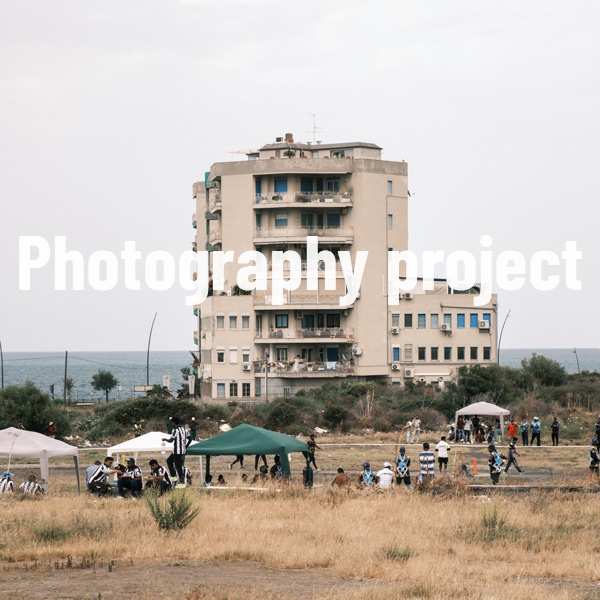
<style>
.page{position:relative;width:600px;height:600px}
.page>*{position:absolute;margin:0}
.t1{font:76.8px "BarlowCondensed-Bold";color:#fdfdfd}
</style>
<div class="page">
<p class="t1" style="left:19px;top:235px;width:563px;height:71px">Photography project</p>
</div>
